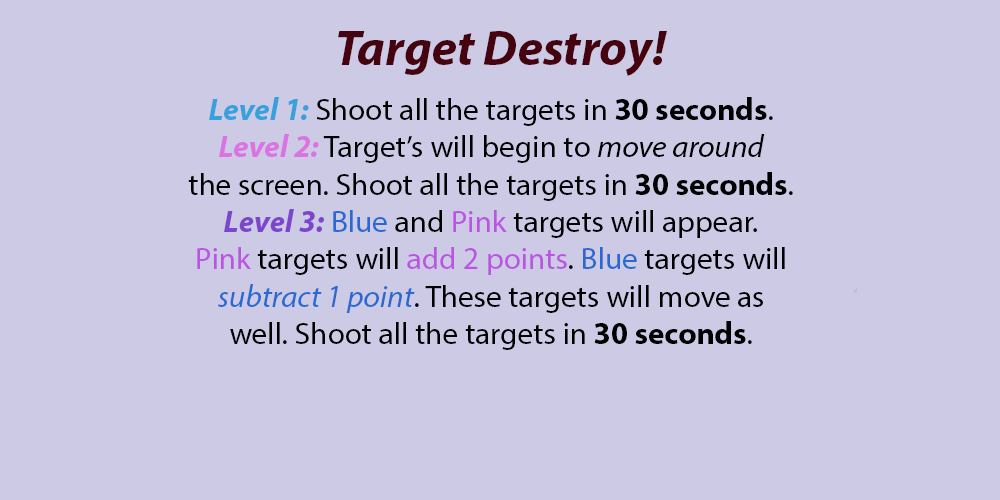
<style>
.page{position:relative;width:1000px;height:500px;background:#cccae5}
.page>*{position:absolute;margin:0}
.t1{font:50px "MyriadPro-BoldIt";color:#44030e}
.t2{font:31.2px "MyriadPro-Regular";color:#000000}
.t3{font:31.2px "MyriadPro-BoldIt";color:#38a1dd}
.t4{font:31.2px "MyriadPro-Bold";color:#000000}
.t5{font:31.2px "MyriadPro-BoldIt";color:#db73e3}
.t6{font:31.2px "MyriadPro-It";color:#000000}
.t7{font:31.2px "MyriadPro-BoldIt";color:#7b45cc}
.t8{font:31.2px "MyriadPro-Regular";color:#2a68d2}
.t9{font:31.2px "MyriadPro-Regular";color:#bc54e3}
.t10{font:31.2px "MyriadPro-It";color:#2a68d2}
</style>
<div class="page">
<p class="t1" style="left:338px;top:31px;width:329px;height:45px">Target Destroy!</p>
<p class="t2" style="left:188px;top:97px;width:605px;height:253px;text-align:center"><span class="t3">Level 1:</span> Shoot all the targets in <span class="t4">30 seconds</span>.<br><span class="t5">Level 2:</span> Target’s will begin to <span class="t6">move around<br></span>the screen. Shoot all the targets in <span class="t4">30 seconds</span>.<br><span class="t7">Level 3: </span><span class="t8">Blue</span> and <span class="t9">Pink</span> targets will appear.<br><span class="t9">Pink </span>targets will <span class="t9">add 2 points</span>. <span class="t8">Blue</span> targets will<br><span class="t10">subtract 1 point</span>. These targets will move as<br>well. Shoot all the targets in <span class="t4">30 seconds</span>.</p>
</div>
